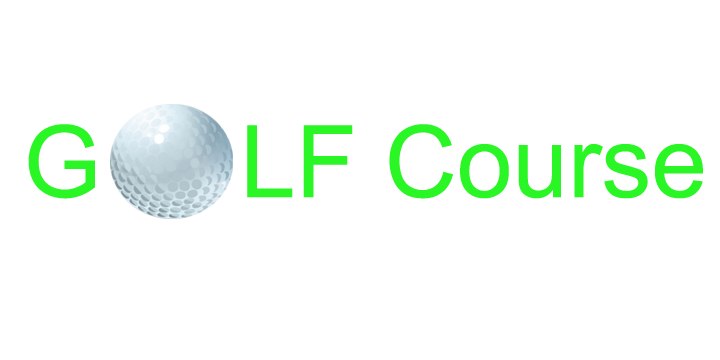
<style>
.page{position:relative;width:720px;height:360px;background:#ffffff}
.page>*{position:absolute;margin:0}
.t1{font:100px "ArialMT";color:#29f624}
</style>
<div class="page">
<p class="t1" style="left:28px;top:124px;width:675px;height:75px">G     LF Course</p>
</div>
